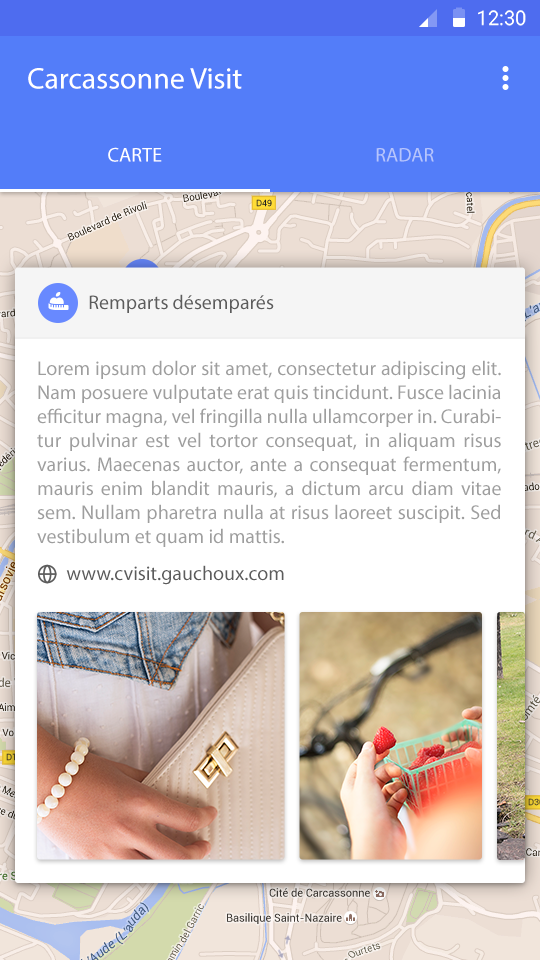
<style>
.page{position:relative;width:540px;height:960px;background:#ffffff}
.page>*{position:absolute;margin:0}
.t1{font:20px "Roboto-Regular";color:#ffffff}
.t2{font:30px "MyriadPro-Regular";color:#ffffff}
.t3{font:20px "MyriadPro-Regular";color:#ffffff}
.t4{font:20px "MyriadPro-Regular";color:#b6c5fc}
.t5{font:20px "MyriadPro-Regular";color:#5c5c5c}
.t6{font:20px "MyriadPro-Regular";color:#9e9e9e}
</style>
<div class="page">
<p class="t1" style="left:478px;top:10px;width:48px;height:16px">12:30</p>
<p class="t2" style="left:28px;top:68px;width:214px;height:21px">Carcassonne Visit</p>
<p class="t3" style="left:108px;top:147px;width:54px;height:15px">CARTE</p>
<p class="t4" style="left:376px;top:148px;width:58px;height:14px">RADAR</p>
<p class="t5" style="left:89px;top:294px;width:185px;height:19px">Remparts désemparés</p>
<p class="t6" style="left:37px;top:360px;width:464px;height:187px;text-align:justify">Lorem ipsum dolor sit amet, consectetur adipiscing elit. Nam posuere vulputate erat quis tincidunt. Fusce lacinia efficitur magna, vel fringilla nulla ullamcorper in. Curabitur pulvinar est vel tortor consequat, in aliquam risus varius. Maecenas auctor, ante a consequat fermentum, mauris enim blandit mauris, a dictum arcu diam vitae sem. Nullam pharetra nulla at risus laoreet suscipit. Sed vestibulum et quam id mattis.</p>
<p class="t5" style="left:66px;top:565px;width:218px;height:20px">www.cvisit.gauchoux.com</p>
</div>
